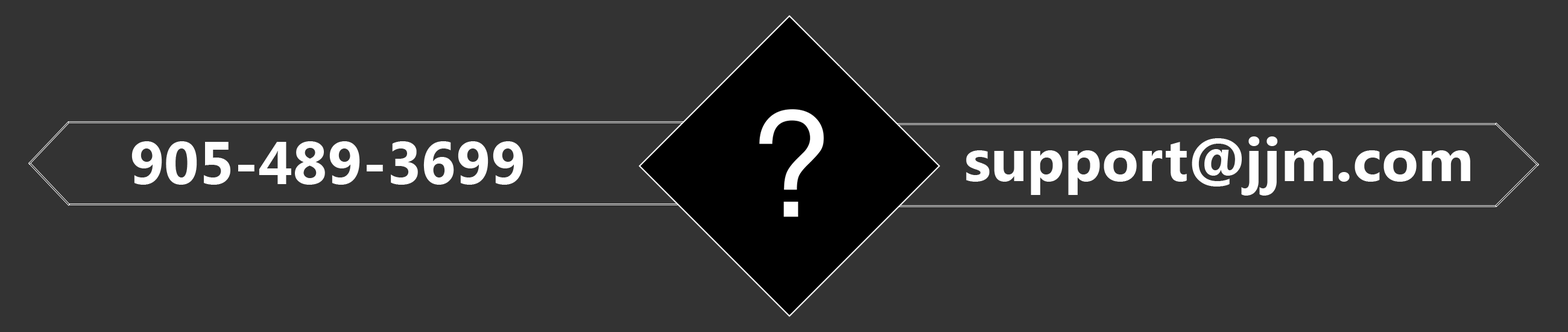
<style>
.page{position:relative;width:1568px;height:332px;background:#333333}
.page>*{position:absolute;margin:0}
.t1{font:60.3px "KhmerUI-Bold";color:#ffffff}
</style>
<div class="page">
<p class="t1" style="left:966px;top:136px;width:504px;height:59px">support@jjm.com</p>
<p class="t1" style="left:131px;top:141px;width:392px;height:44px">905-489-3699</p>
</div>
